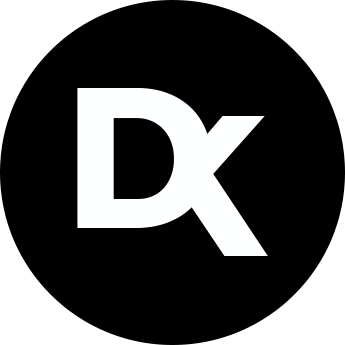
<style>
.page{position:relative;width:345px;height:345px;background:#000000}
.page>*{position:absolute;margin:0}
.t1{font:198.9px "Montserrat-Bold";color:#feffff}
.t2{font:198.9px "Montserrat-Bold"}
</style>
<div class="page">
<p class="t1" style="left:77px;top:88px;width:134px;height:140px">D</p>
<p class="t2" style="left:134px;top:116px;width:134px;height:140px">K</p>
</div>
